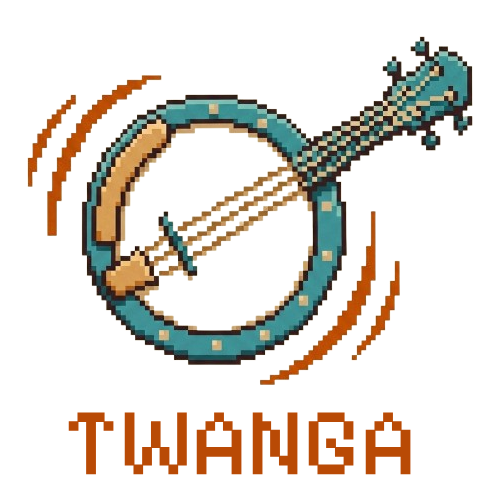
<style>
.page{position:relative;width:500px;height:500px;background:#ffffff}
.page>*{position:absolute;margin:0}
.t1{font:96px "PixelifySans-Regular";color:#b94a05}
</style>
<div class="page">
<p class="t1" style="left:68px;top:412px;width:343px;height:63px">TWANGA</p>
</div>
